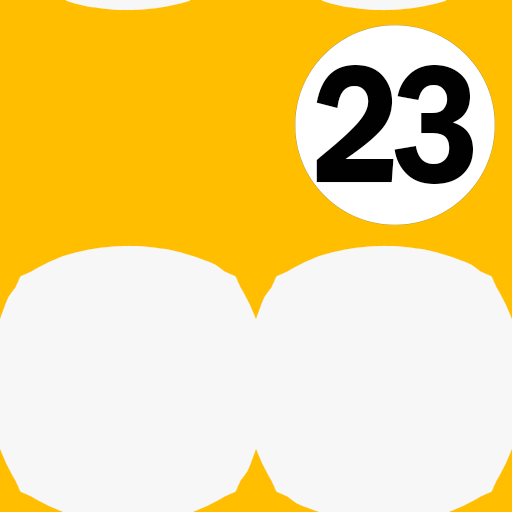
<style>
.page{position:relative;width:512px;height:512px;background:#f7f7f7}
.page>*{position:absolute;margin:0}
.t1{font:172.5px "FranklinGothic-Demi";letter-spacing:-0.05em;color:#010101;scale:0.87 1}
</style>
<div class="page">
<p class="t1" style="left:316px;top:65px;width:157px;height:119px">23</p>
</div>
